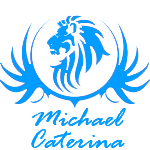
<style>
.page{position:relative;width:150px;height:150px;background:#ffffff}
.page>*{position:absolute;margin:0}
.t1{font:30px "RageItalic";color:#009cff}
</style>
<div class="page">
<p class="t1" style="left:32px;top:108px;width:94px;height:18px">Michael</p>
<p class="t1" style="left:32px;top:108px;width:94px;height:18px">Michael</p>
<p class="t1" style="left:31px;top:129px;width:94px;height:19px">Caterina</p>
<p class="t1" style="left:31px;top:129px;width:94px;height:19px">Caterina</p>
</div>
